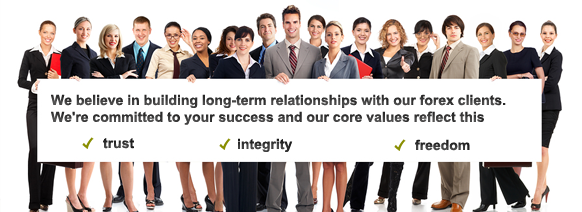
<style>
.page{position:relative;width:582px;height:212px;background:#ffffff}
.page>*{position:absolute;margin:0}
.t1{font:14px "Arial-BoldMT";color:#444343}
.t2{font:14px "Arial-BoldMT";color:#313131}
.t3{font:14px "Arial-BoldMT";color:#353535}
.t4{font:14px "Arial-BoldMT";color:#373737}
</style>
<div class="page">
<p class="t1" style="left:51px;top:94px;width:455px;height:31px;opacity:0.94">We believe in building long-term relationships with our forex clients. <br>We're committed to your success and our core values reflect this</p>
<p class="t2" style="left:103px;top:138px;width:31px;height:11px">trust</p>
<p class="t3" style="left:238px;top:138px;width:55px;height:14px">integrity</p>
<p class="t4" style="left:415px;top:139px;width:55px;height:12px">freedom</p>
</div>
